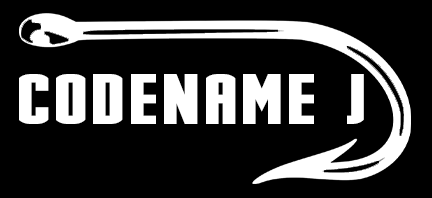
<style>
.page{position:relative;width:432px;height:198px;background:#000000}
.page>*{position:absolute;margin:0}
.t1{font:85.2px "Stark";color:#ffffff}
</style>
<div class="page">
<p class="t1" style="left:19px;top:74px;width:345px;height:50px">codename j</p>
</div>
